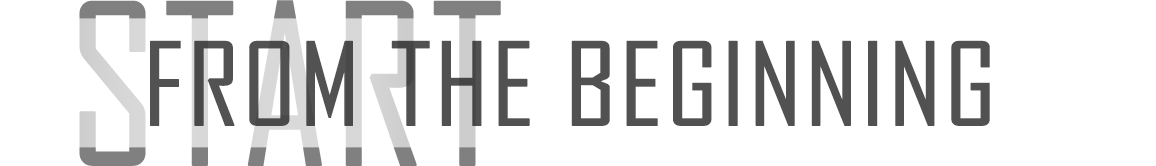
<style>
.page{position:relative;width:1156px;height:166px;background:#ffffff}
.page>*{position:absolute;margin:0}
.t1{font:214px "AgencyFB-Reg";text-transform:uppercase;font-weight:bold}
.t2{font:110px "AgencyFB-Reg";color:#515151;text-transform:uppercase;font-weight:bold;scale:1.1 1}
</style>
<div class="page">
<p class="t1" style="left:79px;top:0px;width:422px;height:166px">start</p>
<p class="t2" style="left:150px;top:40px;width:840px;height:86px">from the beginning</p>
</div>
